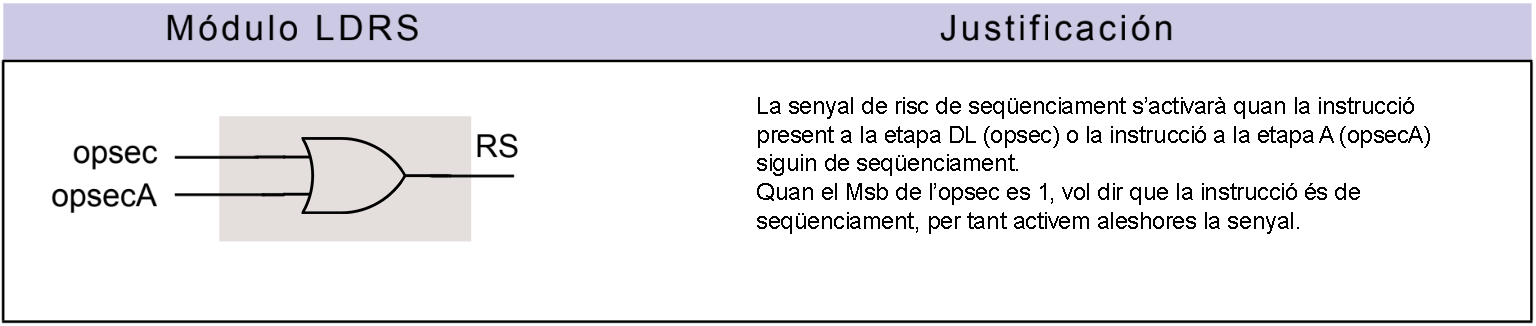
<style>
.page{position:relative;width:1536px;height:326px;background:#ffffff}
.page>*{position:absolute;margin:0}
.t1{font:24px "ArialMT";letter-spacing:-0.02em;color:#000000}
</style>
<div class="page">
<p class="t1" style="left:757px;top:97px;width:673px;height:137px">La senyal de risc de seqüenciament s’activarà quan la instrucció<br>present a la etapa DL (opsec) o la instrucció a la etapa A (opsecA)<br>siguin de seqüenciament.<br>Quan el Msb de l’opsec es 1, vol dir que la instrucció és de<br>seqüenciament, per tant activem aleshores la senyal.</p>
</div>
